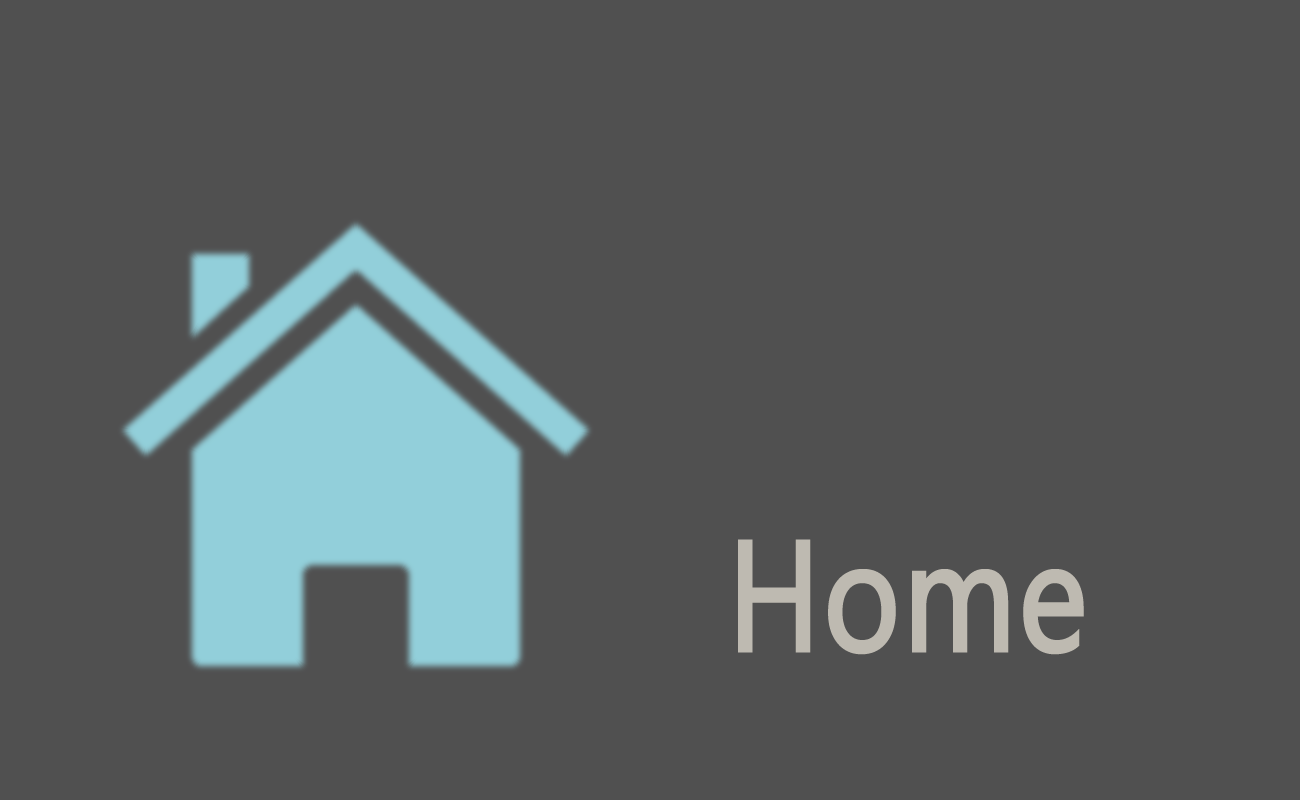
<style>
.page{position:relative;width:1300px;height:800px;background:#505050}
.page>*{position:absolute;margin:0}
.t1{font:156px "SegoeUI";color:#bebab1;font-weight:bold;scale:0.83 1}
</style>
<div class="page">
<p class="t1" style="left:738px;top:539px;width:346px;height:116px">Home</p>
</div>
